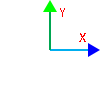
<style>
.page{position:relative;width:100px;height:100px;background:#ffffff}
.page>*{position:absolute;margin:0}
.t1{font:14px "Calibri";color:#ff0000}
</style>
<div class="page">
<p class="t1" style="left:60px;top:8px;width:5px;height:9px">Y</p>
<p class="t1" style="left:79px;top:33px;width:7px;height:9px">X</p>
</div>
